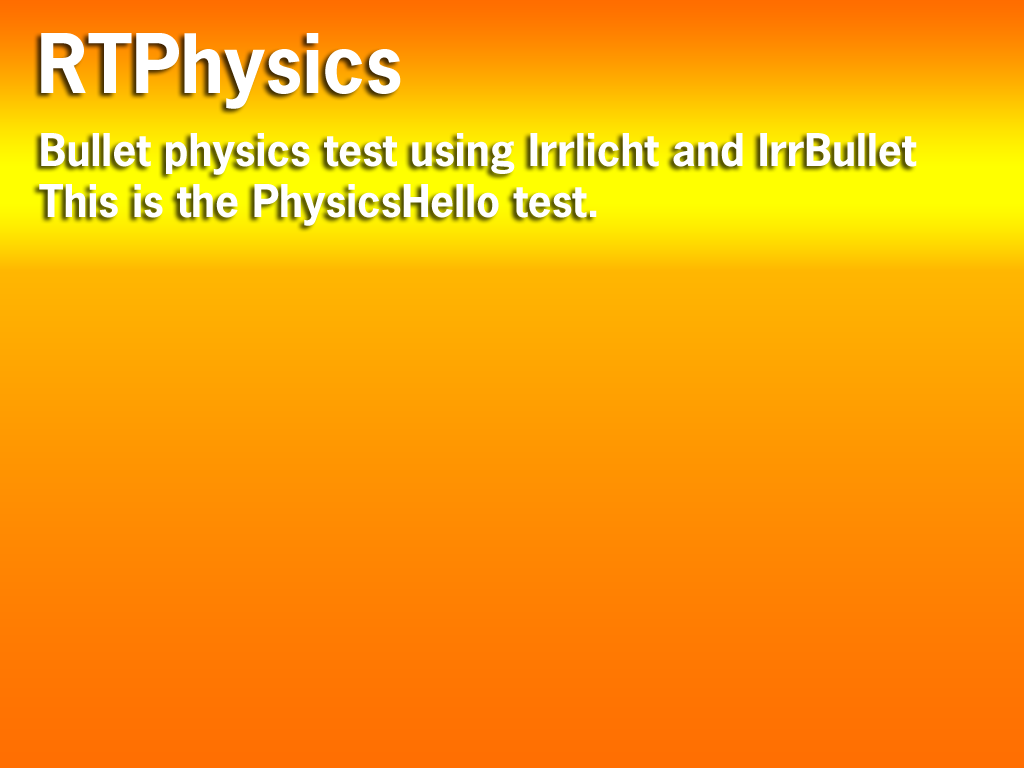
<style>
.page{position:relative;width:1024px;height:768px}
.page>*{position:absolute;margin:0}
.t1{font:77px "NewsGothicLT-Bold";color:#ffffff}
.t2{font:42.4px "NewsGothicLT-Bold";color:#ffffff}
</style>
<div class="page">
<p class="t1" style="left:41px;top:33px;width:360px;height:76px">RTPhysics</p>
<p class="t2" style="left:39px;top:133px;width:878px;height:93px">Bullet physics test using Irrlicht and IrrBullet<br>This is the PhysicsHello test.</p>
</div>
